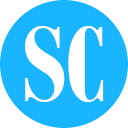
<style>
.page{position:relative;width:128px;height:128px;background:#19b5fe}
.page>*{position:absolute;margin:0}
.t1{font:116.7px "BodoniMTCondensed-Bold";color:#ffffff}
</style>
<div class="page">
<p class="t1" style="left:25px;top:26px;width:79px;height:76px">SC</p>
</div>
